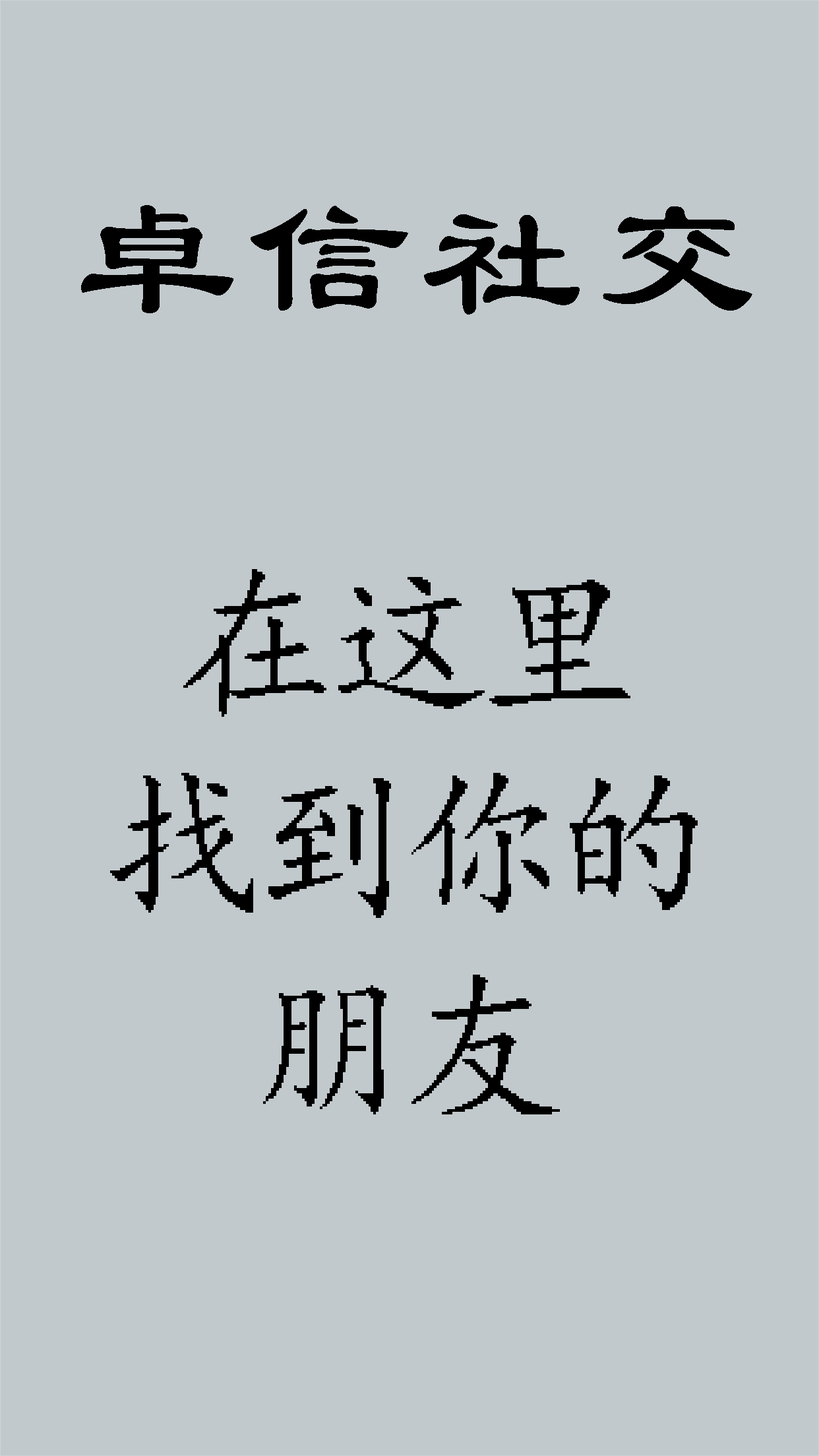
<style>
.page{position:relative;width:819px;height:1456px;background:#c2c9cc}
.page>*{position:absolute;margin:0}
.t1{font:168.8px "LiSu";letter-spacing:0.06em;color:#000000}
.t2{font:168.8px/201.6px "¿¬Ìå";letter-spacing:-0.08em;color:#000000}
</style>
<div class="page">
<p class="t1" style="left:81px;top:205px;width:671px;height:110px">卓信社交</p>
<p class="t2" style="left:110px;top:569px;width:588px;height:545px;text-align:center">在这里<br>找到你的<br>朋友</p>
</div>
